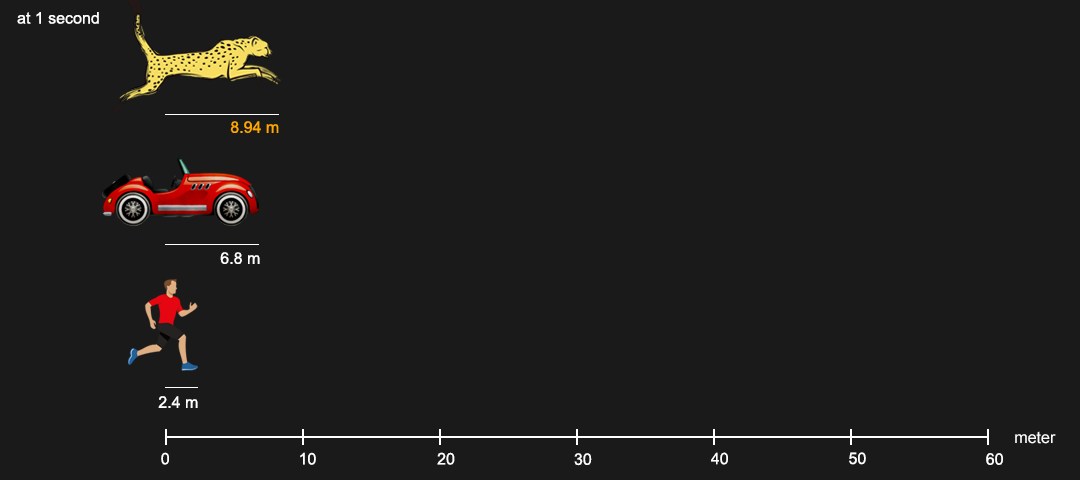
<style>
.page{position:relative;width:1080px;height:480px;background:#1a1a1a}
.page>*{position:absolute;margin:0}
.t1{font:16px "ArialMT";color:#ffffff}
.t2{font:16px "ArialMT";color:#ffa800}
</style>
<div class="page">
<p class="t1" style="left:17px;top:12px;width:82px;height:12px">at 1 second</p>
<p class="t2" style="left:230px;top:121px;width:49px;height:12px">8.94 m</p>
<p class="t1" style="left:220px;top:252px;width:40px;height:12px">6.8 m</p>
<p class="t1" style="left:158px;top:396px;width:40px;height:12px">2.4 m</p>
<p class="t1" style="left:1015px;top:431px;width:41px;height:13px">meter</p>
<p class="t1" style="left:161px;top:452px;width:8px;height:13px">0</p>
<p class="t1" style="left:300px;top:452px;width:16px;height:13px">10</p>
<p class="t1" style="left:437px;top:452px;width:18px;height:13px">20</p>
<p class="t1" style="left:574px;top:453px;width:18px;height:13px">30</p>
<p class="t1" style="left:711px;top:452px;width:17px;height:13px">40</p>
<p class="t1" style="left:849px;top:452px;width:17px;height:13px">50</p>
<p class="t1" style="left:986px;top:453px;width:17px;height:12px">60</p>
</div>
